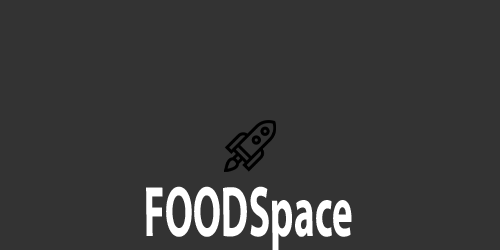
<style>
.page{position:relative;width:500px;height:250px;background:#333333}
.page>*{position:absolute;margin:0}
.t1{font:72px "MyriadPro-Bold";color:#ffffff;scale:0.55 1}
</style>
<div class="page">
<p class="t1" style="left:146px;top:186px;width:206px;height:65px">FOODSpace</p>
</div>
